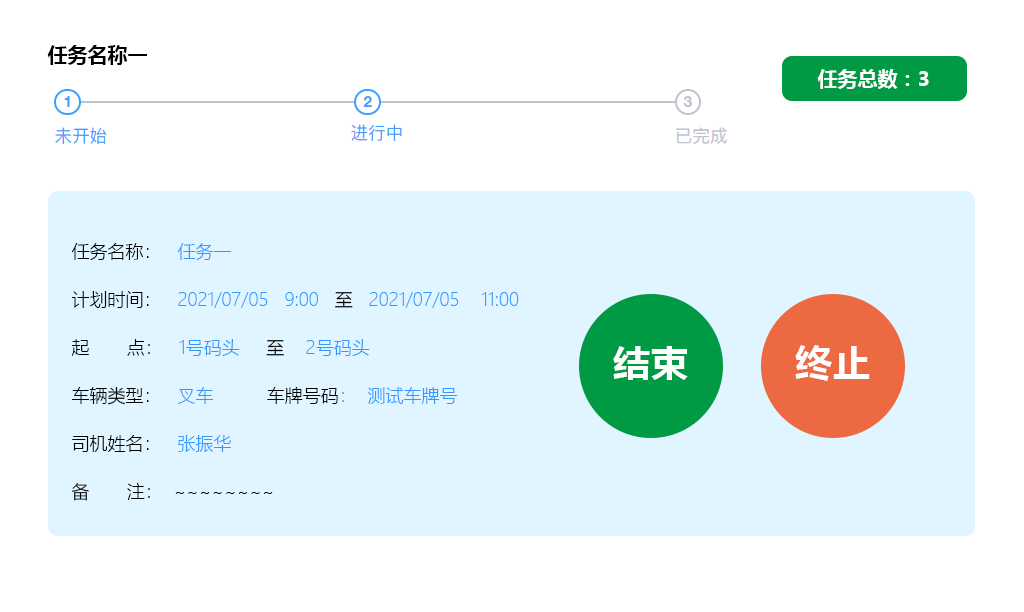
<style>
.page{position:relative;width:1024px;height:612px;background:#ffffff}
.page>*{position:absolute;margin:0}
.t1{font:20px "MicrosoftYaHei-Bold";color:#000000}
.t2{font:20px "MicrosoftYaHei-Bold";color:#ffffff}
.t3{font:18px/48px "MicrosoftYaHeiLight";color:#000000}
.t4{font:18px/48px "MicrosoftYaHeiLight";color:#3399ff}
.t5{font:37.2px "MicrosoftYaHei-Bold";color:#ffffff}
</style>
<div class="page">
<p class="t1" style="left:47px;top:45px;width:100px;height:20px">任务名称一</p>
<p class="t2" style="left:817px;top:69px;width:112px;height:20px">任务总数：3</p>
<p class="t3" style="left:71px;top:243px;width:448px;height:258px">任务名称：   <span class="t4">任务一<br></span>计划时间：  <span class="t4"> 2021/07/05   9:00 </span>  至   <span class="t4">2021/07/05    11:00<br></span>起       点：  <span class="t4"> 1号码头  </span>   至    <span class="t4">2号码头  <br></span>车辆类型：   <span class="t4">叉车          </span>车牌号码<span class="t4">：  测试车牌号<br></span>司机姓名：   <span class="t4">张振华<br></span>备       注：  ~~~~~~~~</p>
<p class="t5" style="left:613px;top:346px;width:75px;height:34px">结束</p>
<p class="t5" style="left:795px;top:345px;width:75px;height:36px">终止</p>
</div>
